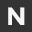
<style>
.page{position:relative;width:32px;height:32px;background:#333333}
.page>*{position:absolute;margin:0}
.t1{font:25px "Montserrat-Bold";color:#f6f6f6}
</style>
<div class="page">
<p class="t1" style="left:8px;top:7px;width:17px;height:18px">N</p>
</div>
